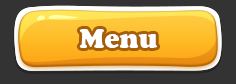
<style>
.page{position:relative;width:236px;height:84px;background:#333333}
.page>*{position:absolute;margin:0}
.t1{font:28.2px "CooperBlack";color:#ffffff}
</style>
<div class="page">
<p class="t1" style="left:79px;top:29px;width:79px;height:19px">Menu</p>
</div>
